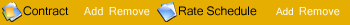
<style>
.page{position:relative;width:350px;height:25px;background:#e7ae02}
.page>*{position:absolute;margin:0}
.t1{font:12px "MicrosoftSansSerif";color:#010101}
.t2{font:11px "MicrosoftSansSerif";color:#fefffe}
.t3{font:10px "MicrosoftSansSerif";color:#fefffe}
</style>
<div class="page">
<p class="t1" style="left:23px;top:6px;width:46px;height:10px">Contract</p>
<p class="t1" style="left:179px;top:6px;width:78px;height:10px">Rate Schedule</p>
<p class="t2" style="left:84px;top:7px;width:19px;height:9px">Add</p>
<p class="t2" style="left:109px;top:7px;width:41px;height:9px">Remove</p>
<p class="t3" style="left:276px;top:7px;width:17px;height:8px">Add</p>
<p class="t2" style="left:299px;top:7px;width:41px;height:9px">Remove</p>
</div>
